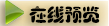
<style>
.page{position:relative;width:109px;height:26px}
.page>*{position:absolute;margin:0}
.t1{font:17.8px "JHeiMi";color:#000000}
</style>
<div class="page">
<p class="t1" style="left:29px;top:6px;width:71px;height:17px">在线预览</p>
</div>
